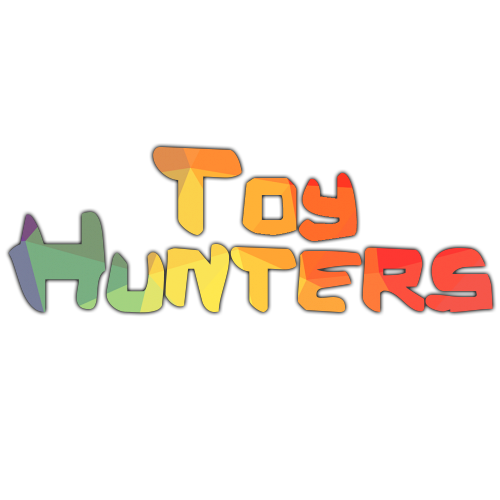
<style>
.page{position:relative;width:500px;height:500px;background:#ffffff}
.page>*{position:absolute;margin:0}
.t1{font:137.5px "Kalystrine";font-variant:small-caps}
.t2{font:145.9px "Kalystrine";font-variant:small-caps}
</style>
<div class="page">
<p class="t1" style="left:153px;top:147px;width:204px;height:94px">Toy</p>
<p class="t2" style="left:8px;top:212px;width:485px;height:101px">Hunters</p>
</div>
